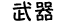
<style>
.page{position:relative;width:64px;height:24px;background:#ffffff}
.page>*{position:absolute;margin:0}
.t1{font:21.1px "HannotateSC-W7";letter-spacing:0.055em;color:#000000}
</style>
<div class="page">
<p class="t1" style="left:12px;top:1px;width:42px;height:21px">武器</p>
</div>
